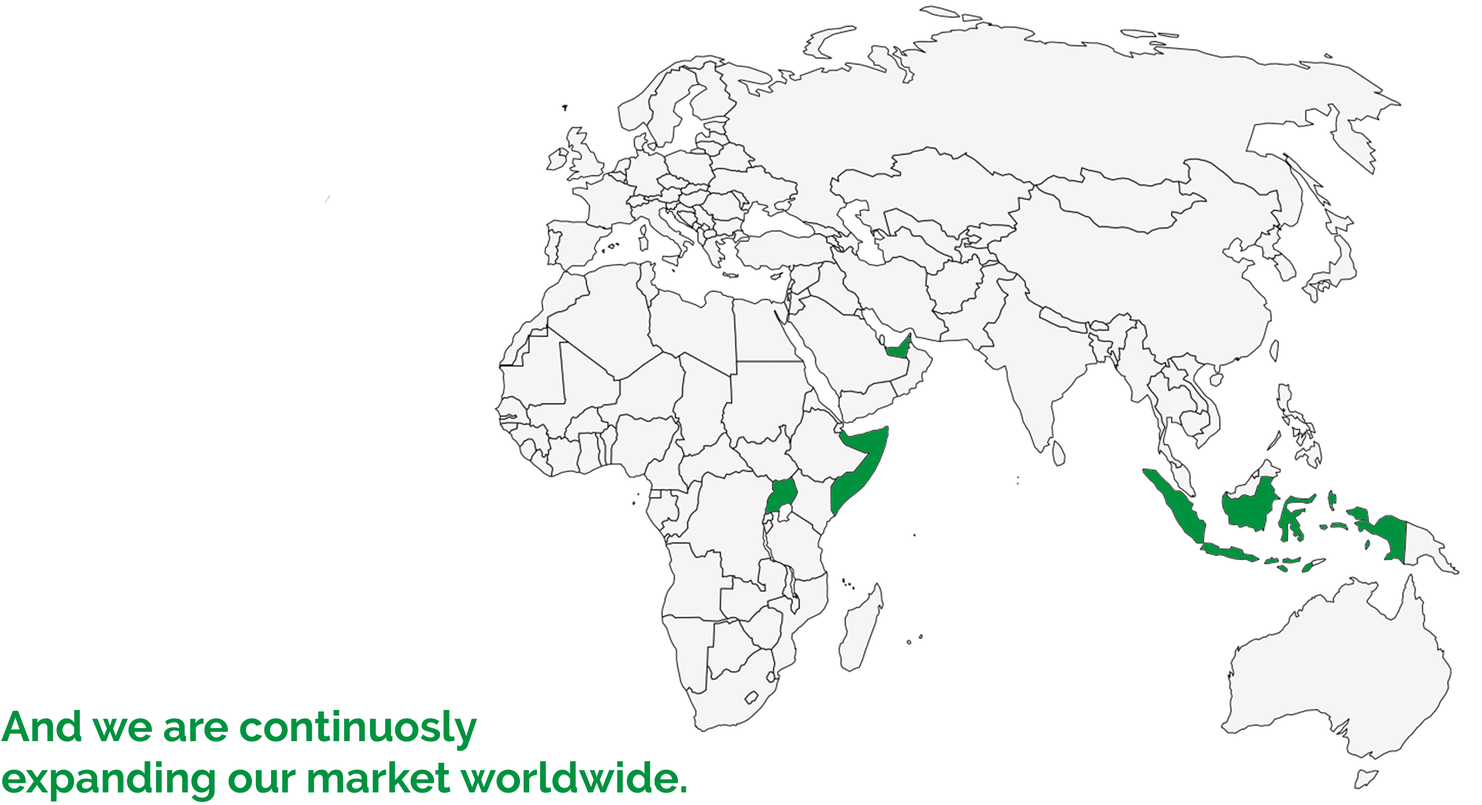
<style>
.page{position:relative;width:1482px;height:805px;background:#ffffff}
.page>*{position:absolute;margin:0}
.t1{font:42.7px "Raleway-Bold";color:#00923f}
</style>
<div class="page">
<p class="t1" style="left:1px;top:710px;width:685px;height:92px">And we are continuosly<br>expanding our market worldwide.</p>
</div>
